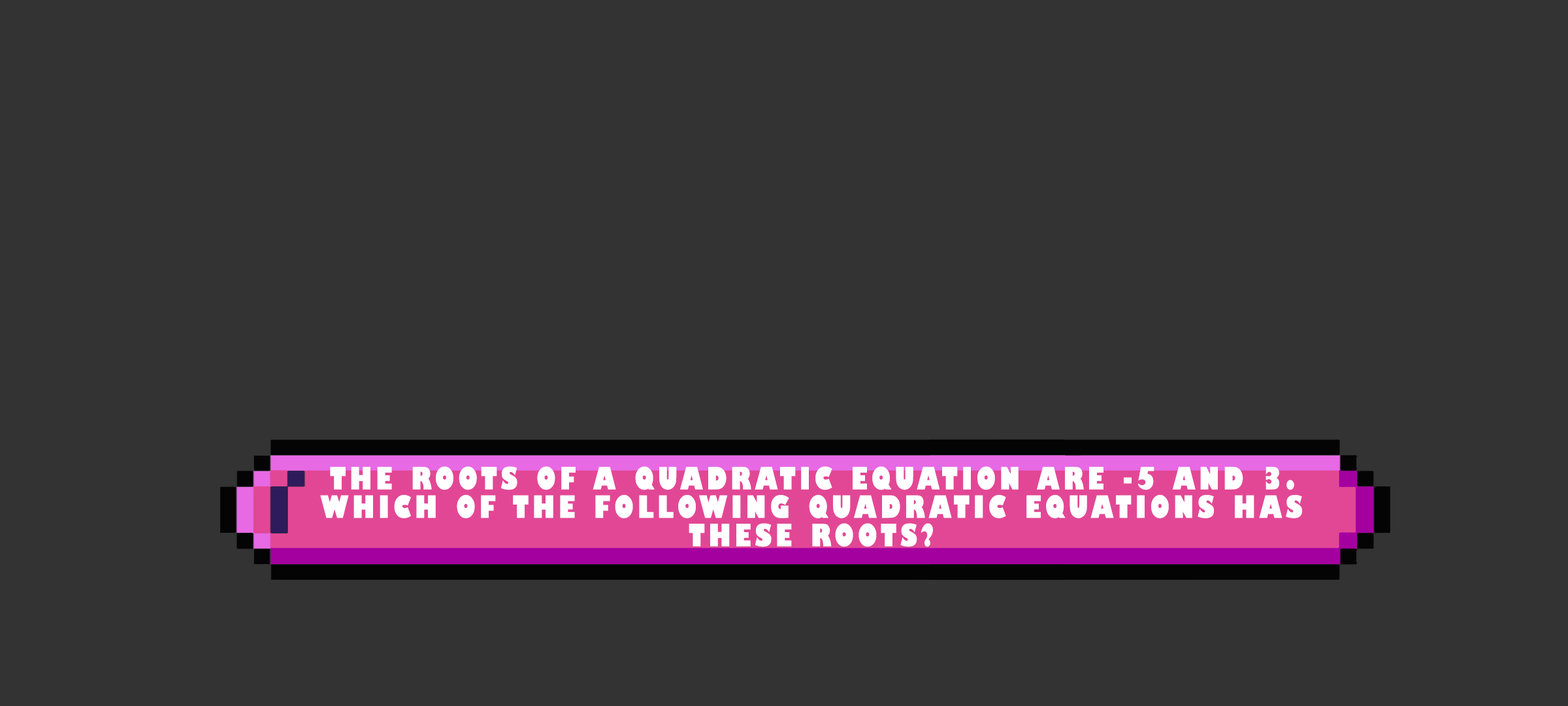
<style>
.page{position:relative;width:1568px;height:706px;background:#333333}
.page>*{position:absolute;margin:0}
.t1{font:30px/28.4px "GillSans-UltraBoldCondensed";letter-spacing:0.115em;color:#ffffff;text-transform:uppercase;scale:1.12 1}
</style>
<div class="page">
<p class="t1" style="left:320px;top:466px;width:982px;height:81px;text-align:center">The roots of a quadratic equation are -5 and 3. Which of the following quadratic equations has these roots?</p>
</div>
